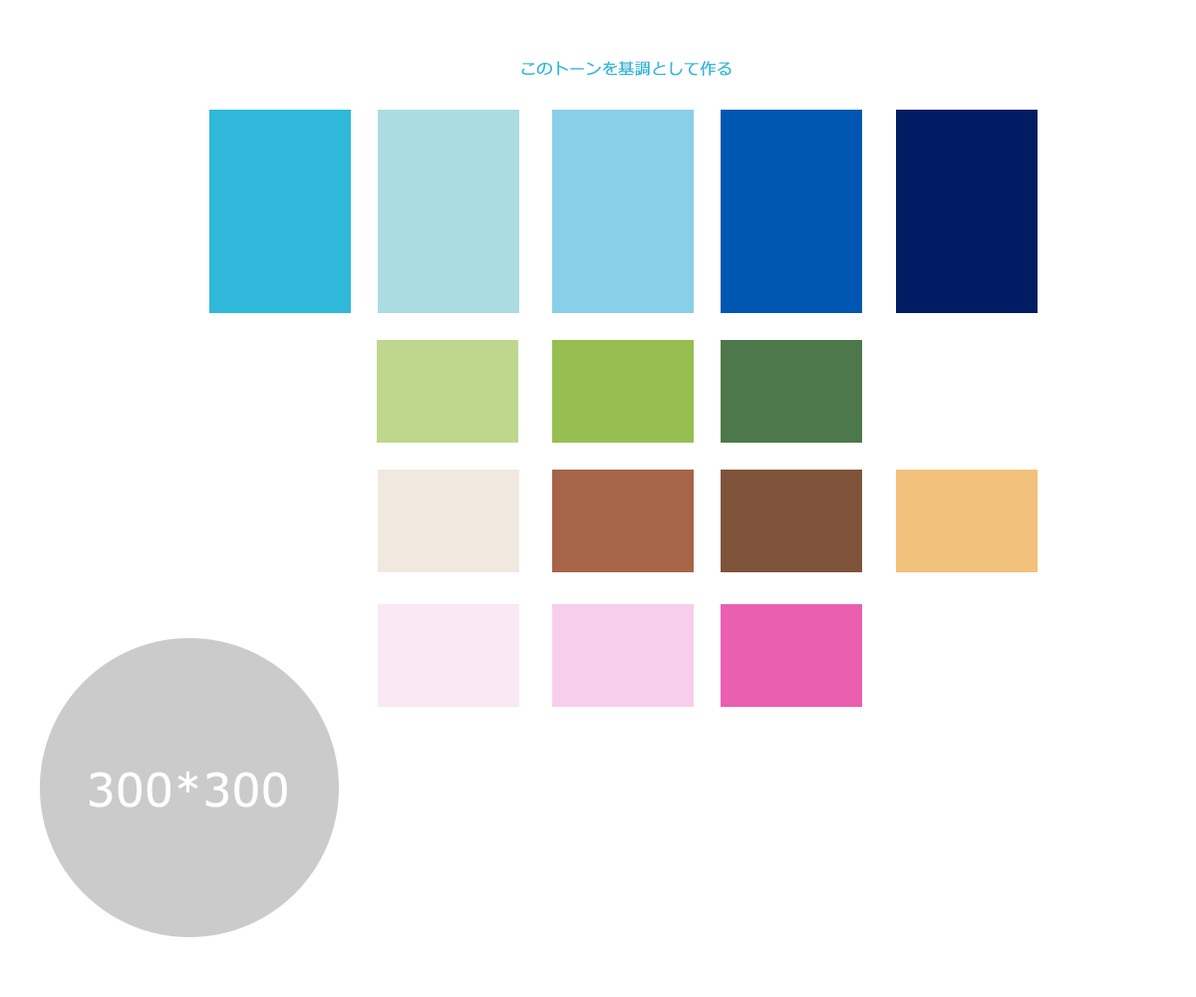
<style>
.page{position:relative;width:1196px;height:997px;background:#ffffff}
.page>*{position:absolute;margin:0}
.t1{font:15.9px "Meiryo";color:#2fb8d9;font-weight:bold}
.t2{font:44.9px "Meiryo";color:#ffffff;font-weight:bold}
</style>
<div class="page">
<p class="t1" style="left:521px;top:61px;width:211px;height:15px">このトーンを基調として作る</p>
<p class="t2" style="left:90px;top:771px;width:197px;height:36px">300*300</p>
</div>
